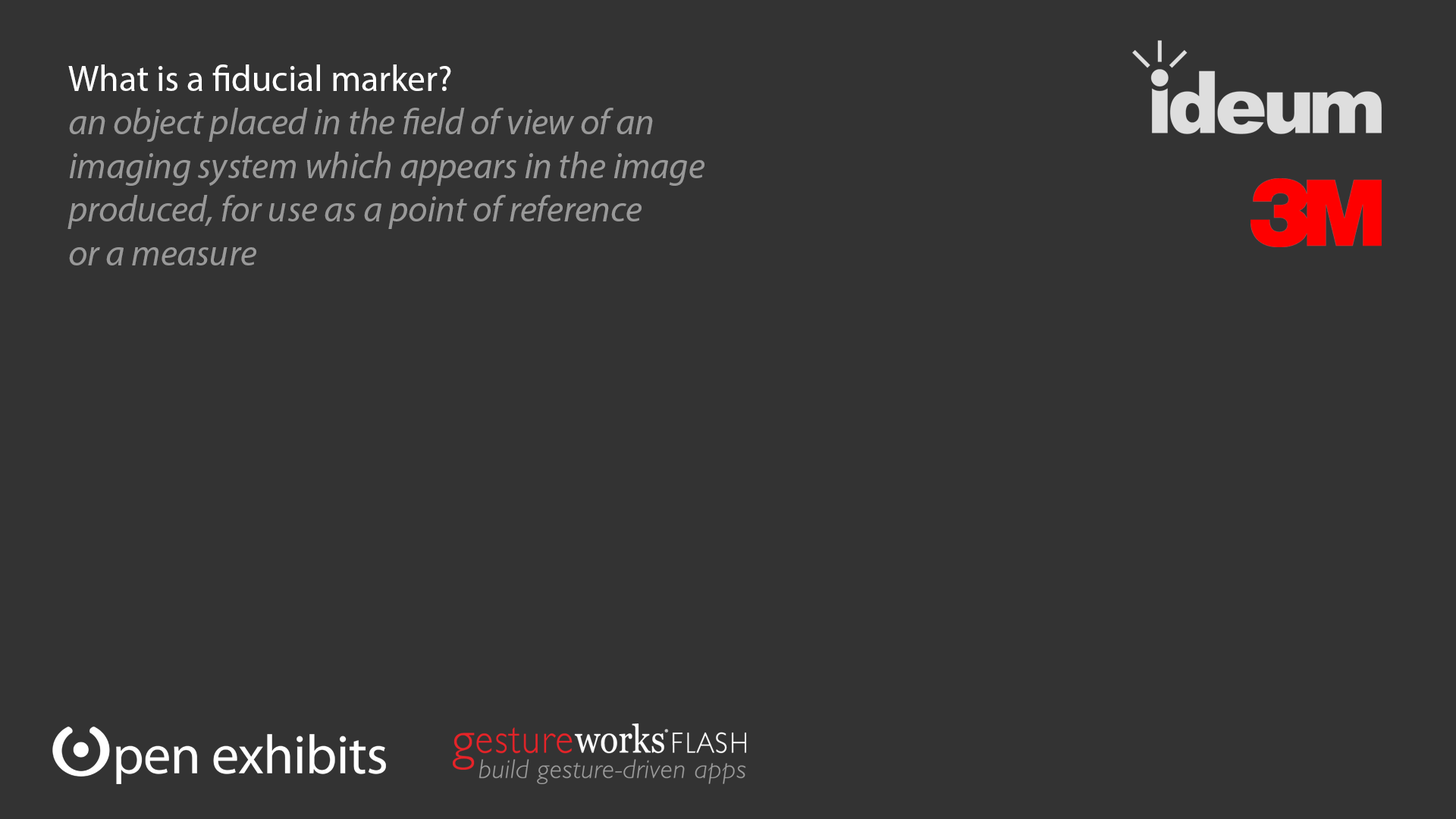
<style>
.page{position:relative;width:1456px;height:819px;background:#333333}
.page>*{position:absolute;margin:0}
.t1{font:36.4px "MyriadPro-It";color:#999999}
.t2{font:36.4px "MyriadPro-Regular";color:#ffffff}
</style>
<div class="page">
<p class="t1" style="left:67px;top:64px;width:637px;height:201px"><span class="t2">What is a fiducial marker?<br></span>an object placed in the field of view of an <br>imaging system which appears in the image <br>produced, for use as a point of reference <br>or a measure</p>
</div>
